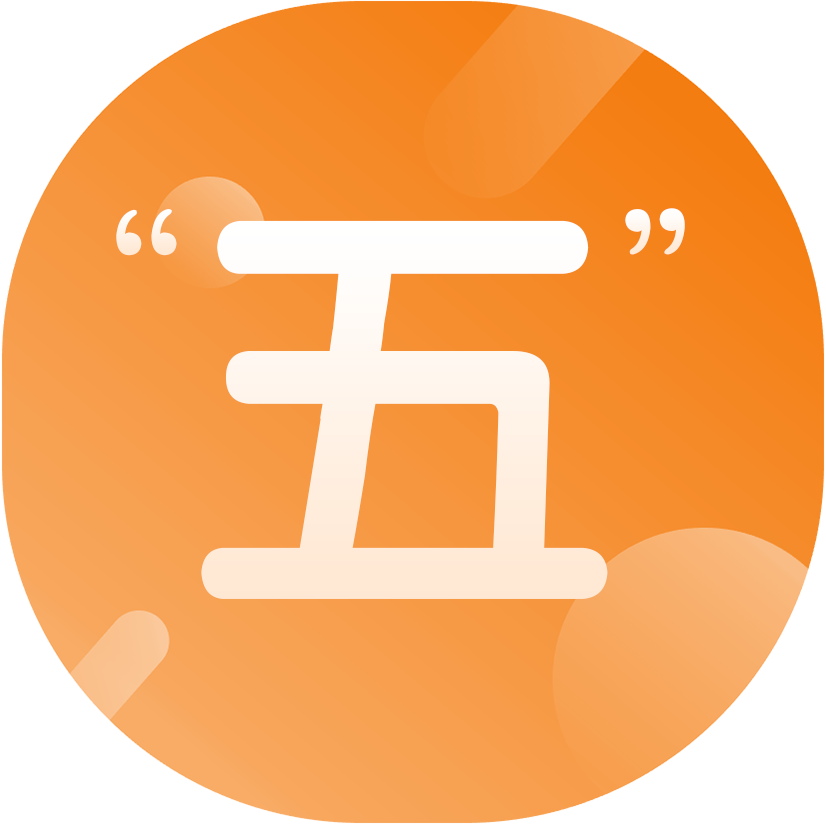
<style>
.page{position:relative;width:826px;height:824px}
.page>*{position:absolute;margin:0}
.t1{font:199.6px "FZY4JW--GB1-0";color:#ffefe1}
.t2{font:199.6px "FZY4JW--GB1-0";color:#fff8f1}
.t3{font:450px "FZY4JW--GB1-0";color:#fff5eb}
</style>
<div class="page">
<p class="t1" style="left:116px;top:209px;width:61px;height:47px">“</p>
<p class="t2" style="left:625px;top:208px;width:60px;height:47px">”</p>
<p class="t3" style="left:201px;top:220px;width:407px;height:379px">五</p>
</div>
